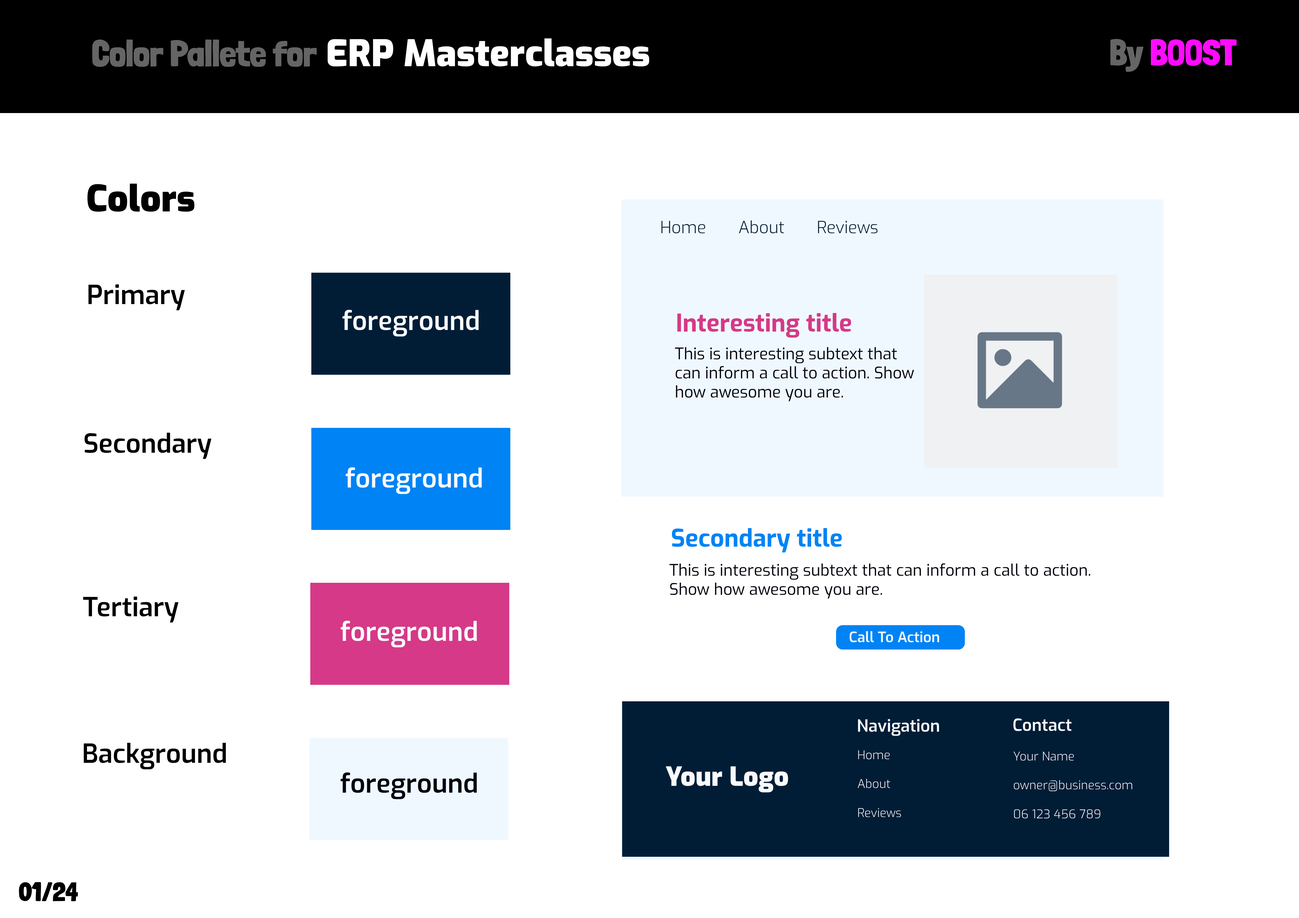
<style>
.page{position:relative;width:1299px;height:918px;background:#ffffff}
.page>*{position:absolute;margin:0}
.t1{font:36.5px "LondrinaSolid-Black";color:#656565}
.t2{font:36.5px "Exo-Black";color:#ffffff}
.t3{font:36.5px "LondrinaSolid-Black";color:#fd0cfd}
.t4{font:36.5px "Exo-Black";color:#000000}
.t5{font:16.8px "Exo-Light";color:#011d36}
.t6{font:26.3px "Exo-SemiBold";color:#000000}
.t7{font:26.3px "Exo-SemiBold";color:#f8fafc}
.t8{font:24.3px "Exo-Bold";color:#d53987}
.t9{font:16px "Exo-Regular";color:#02050d}
.t10{font:24.3px "Exo-Bold";color:#0083f5}
.t11{font:14.4px "Exo-SemiBold";color:#f8fafc}
.t12{font:16.8px "Exo-SemiBold";color:#f8fafc}
.t13{font:12px "Exo-Light";color:#f8fafc}
.t14{font:26.3px "Exo-SemiBold";color:#02050d}
.t15{font:26.3px "Exo-Black";color:#f8fafc}
.t16{font:26.3px "LondrinaSolid-Black";color:#000000}
</style>
<div class="page">
<p class="t1" style="left:92px;top:38px;width:557px;height:29px">Color Pallete for <span class="t2">ERP Masterclasses</span></p>
<p class="t3" style="left:1110px;top:39px;width:126px;height:33px"><span class="t1">By </span>BOOST</p>
<p class="t4" style="left:87px;top:183px;width:107px;height:29px">Colors</p>
<p class="t5" style="left:661px;top:220px;width:216px;height:13px">Home       About       Reviews</p>
<p class="t6" style="left:88px;top:284px;width:97px;height:26px">Primary</p>
<p class="t7" style="left:342px;top:310px;width:136px;height:27px">foreground</p>
<p class="t8" style="left:677px;top:313px;width:174px;height:25px">Interesting title</p>
<p class="t9" style="left:675px;top:347px;width:239px;height:55px">This is interesting subtext that can inform a call to action. Show how awesome you are.</p>
<p class="t6" style="left:85px;top:433px;width:127px;height:26px">Secondary</p>
<p class="t7" style="left:346px;top:467px;width:136px;height:27px">foreground</p>
<p class="t10" style="left:672px;top:528px;width:170px;height:25px">Secondary title</p>
<p class="t9" style="left:669px;top:564px;width:421px;height:35px">This is interesting subtext that can inform a call to action. Show how awesome you are.</p>
<p class="t6" style="left:83px;top:597px;width:96px;height:26px">Tertiary</p>
<p class="t7" style="left:341px;top:621px;width:136px;height:27px">foreground</p>
<p class="t11" style="left:849px;top:631px;width:90px;height:12px">Call To Action</p>
<p class="t12" style="left:858px;top:719px;width:81px;height:17px">Navigation</p>
<p class="t12" style="left:1013px;top:719px;width:58px;height:12px">Contact</p>
<p class="t6" style="left:84px;top:743px;width:142px;height:27px">Background</p>
<p class="t13" style="left:857px;top:750px;width:44px;height:67px">Home<br><br>About<br><br>Reviews</p>
<p class="t13" style="left:1013px;top:752px;width:119px;height:67px">Your Name<br><br>owner@business.com<br><br>06 123 456 789</p>
<p class="t14" style="left:341px;top:772px;width:136px;height:27px">foreground</p>
<p class="t15" style="left:665px;top:766px;width:123px;height:27px">Your Logo</p>
<p class="t16" style="left:19px;top:882px;width:59px;height:19px">01/24</p>
</div>
